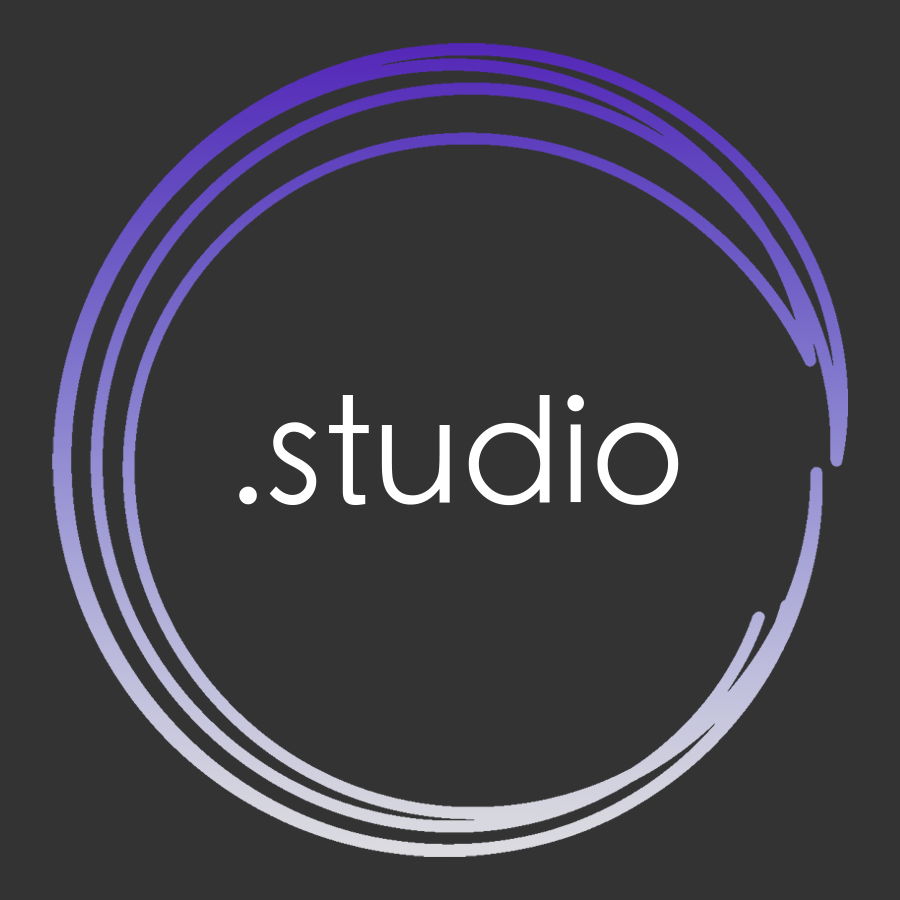
<style>
.page{position:relative;width:900px;height:900px;background:#333333}
.page>*{position:absolute;margin:0}
.t1{font:145.8px "STHeitiTC-Light";color:#ffffff}
</style>
<div class="page">
<p class="t1" style="left:239px;top:394px;width:440px;height:112px">.studio</p>
</div>
